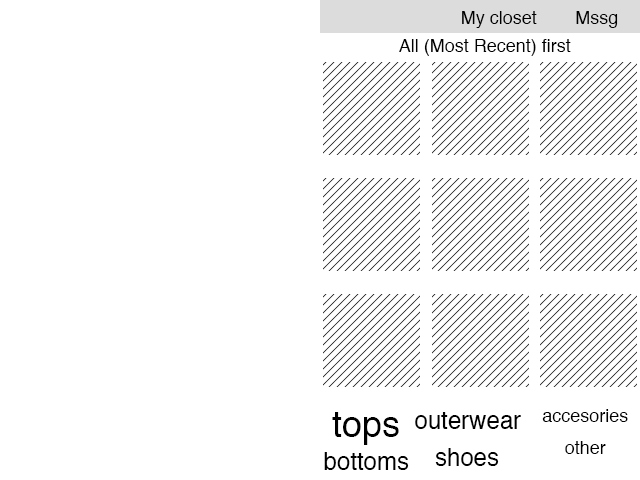
<style>
.page{position:relative;width:640px;height:480px;background:#ffffff}
.page>*{position:absolute;margin:0}
.t1{font:18px "Helvetica";color:#000000}
.t2{font:36px "Helvetica";color:#000000}
.t3{font:24px "Helvetica";color:#000000}
</style>
<div class="page">
<p class="t1" style="left:462px;top:11px;width:75px;height:17px">My closet</p>
<p class="t1" style="left:576px;top:11px;width:42px;height:17px">Mssg</p>
<p class="t1" style="left:399px;top:39px;width:172px;height:17px">All (Most Recent) first</p>
<p class="t2" style="left:332px;top:412px;width:67px;height:33px">tops</p>
<p class="t3" style="left:415px;top:412px;width:106px;height:17px">outerwear</p>
<p class="t1" style="left:542px;top:409px;width:86px;height:13px">accesories</p>
<p class="t3" style="left:435px;top:448px;width:64px;height:18px">shoes</p>
<p class="t1" style="left:565px;top:441px;width:41px;height:13px">other</p>
<p class="t3" style="left:324px;top:452px;width:85px;height:18px">bottoms</p>
</div>
